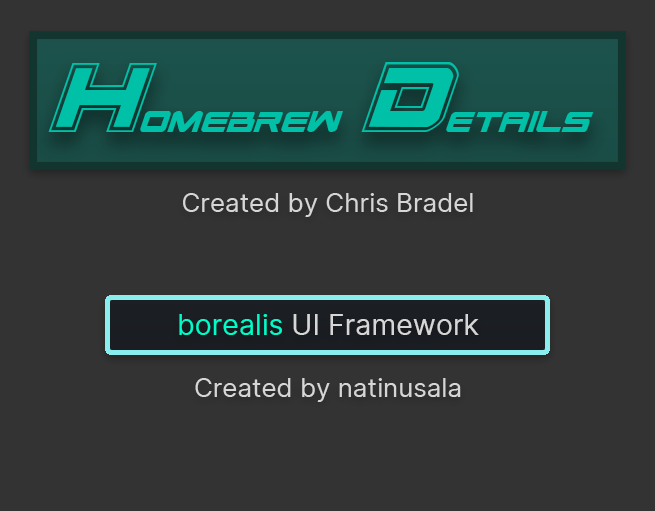
<style>
.page{position:relative;width:655px;height:511px;background:#333333}
.page>*{position:absolute;margin:0}
.t1{font:41.5px "SpaceRangerItalic";color:#00c0a7}
.t2{font:138.2px "SpaceRangerAcademyItalic";color:#00c0a7}
.t3{font:20px "Inter-Switch";color:#d6d6d6}
.t4{font:22px "Inter-Switch";color:#00fcc9}
.t5{font:22px "Inter-Switch";color:#d6d6d6}
</style>
<div class="page">
<p class="t1" style="left:48px;top:62px;width:546px;height:70px"><span class="t2">H</span>omebrew <span class="t2">D</span>etails</p>
<p class="t3" style="left:179px;top:193px;width:300px;height:209px;text-align:center">Created by Chris Bradel<br><br><br><br><br><span class="t4">borealis </span><span class="t5">UI Framework<br><br> <br></span>Created by natinusala</p>
</div>
